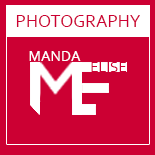
<style>
.page{position:relative;width:155px;height:155px;background:#cc0033}
.page>*{position:absolute;margin:0}
.t1{font:18px "Corbel";color:#cc0033}
.t2{font:15px "Corbel";color:#ffffff}
.t3{font:15px "Corbel";color:#cc0033}
</style>
<div class="page">
<p class="t1" style="left:16px;top:15px;width:124px;height:12px">PHOTOGRAPHY</p>
<p class="t2" style="left:29px;top:51px;width:52px;height:10px">MANDA</p>
<p class="t3" style="left:91px;top:62px;width:36px;height:10px">ELISE</p>
</div>
